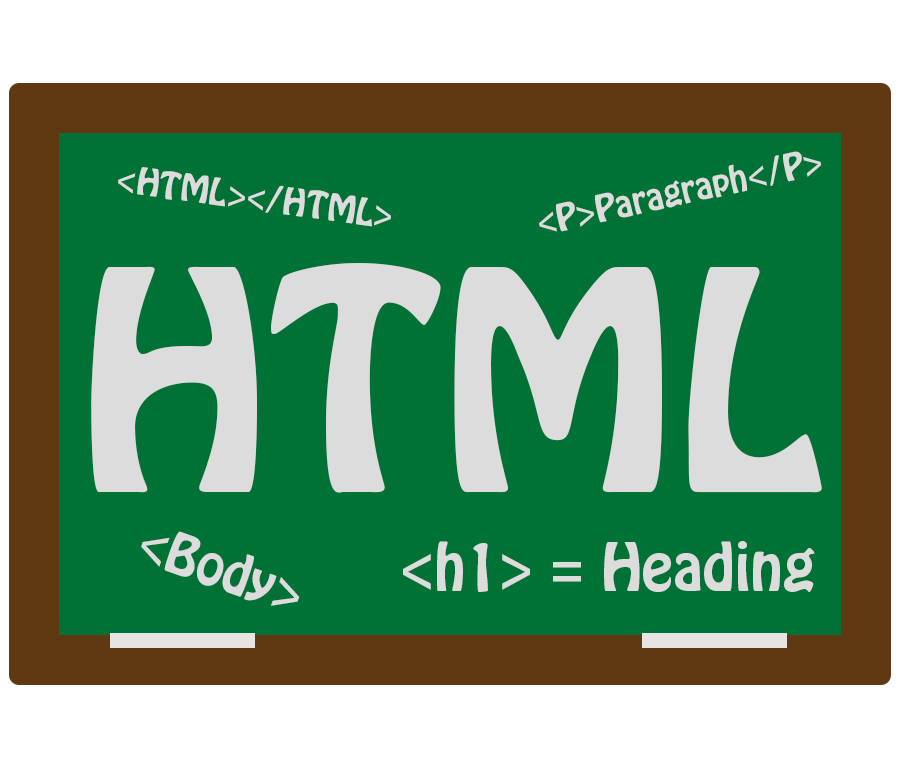
<style>
.page{position:relative;width:900px;height:768px;background:#007236}
.page>*{position:absolute;margin:0}
.t1{font:33.3px "HoboStd";color:#dcdcdc}
.t2{font:270.8px "HoboStd";color:#dcdcdc}
.t3{font:50px "HoboStd";color:#dcdcdc}
.t4{font:58.3px "HoboStd";color:#dcdcdc}
</style>
<div class="page">
<p class="t1" style="left:539px;top:151px;width:283px;height:81px;rotate:-12deg">&lt;P&gt;Paragraph&lt;/P&gt;</p>
<p class="t1" style="left:118px;top:167px;width:273px;height:60px;rotate:8deg">&lt;HTML&gt;&lt;/HTML&gt;</p>
<p class="t2" style="left:91px;top:263px;width:731px;height:230px">HTML</p>
<p class="t3" style="left:141px;top:531px;width:159px;height:75px;rotate:19deg">&lt;Body&gt;</p>
<p class="t4" style="left:403px;top:541px;width:412px;height:51px">&lt;h1&gt; = Heading</p>
</div>
